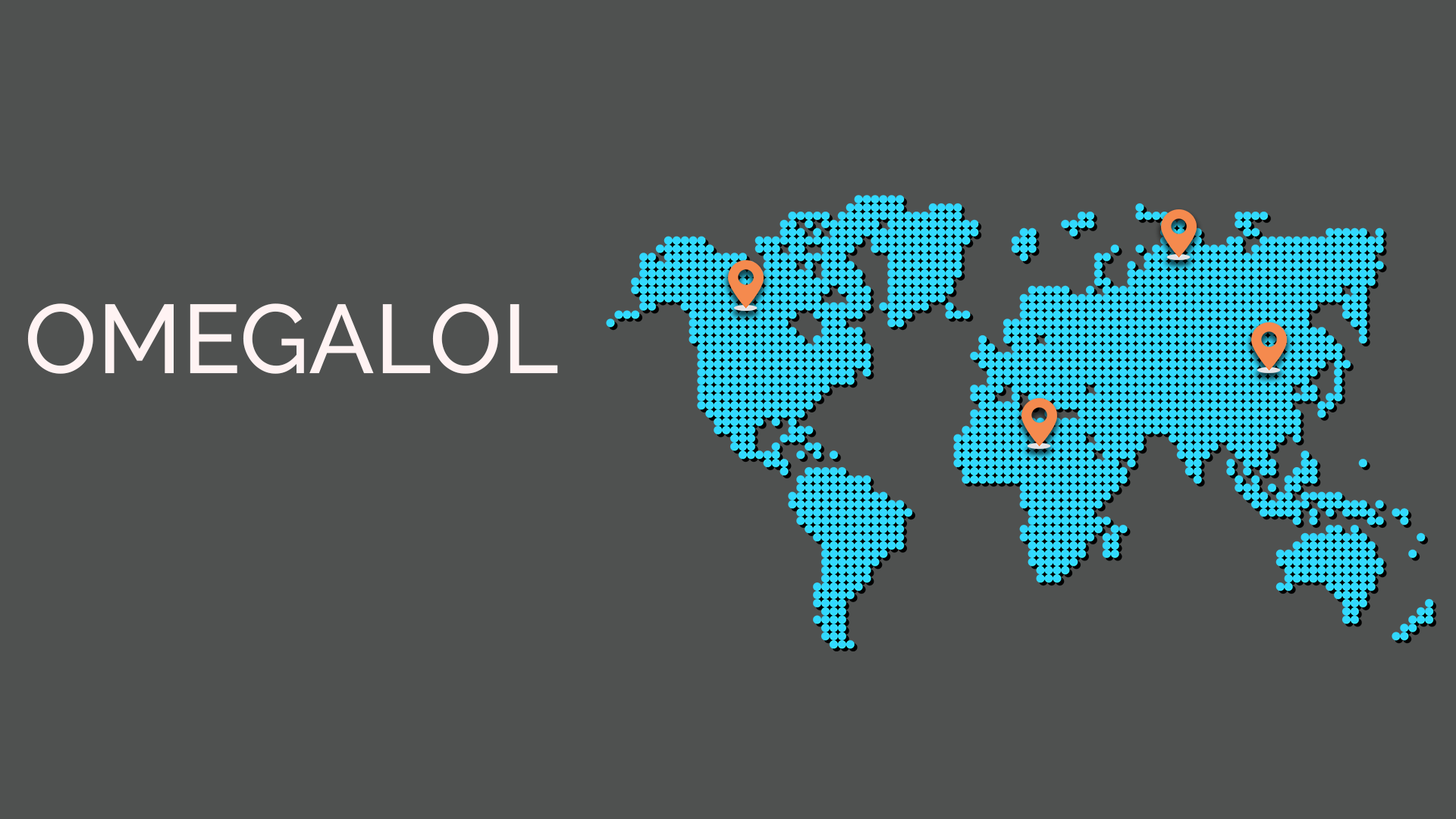
<style>
.page{position:relative;width:1456px;height:819px;background:#4f5150}
.page>*{position:absolute;margin:0}
.t1{font:97.3px "Raleway-Medium";color:#fff3f3}
</style>
<div class="page">
<p class="t1" style="left:27px;top:303px;width:531px;height:71px">OMEGALOL</p>
</div>
